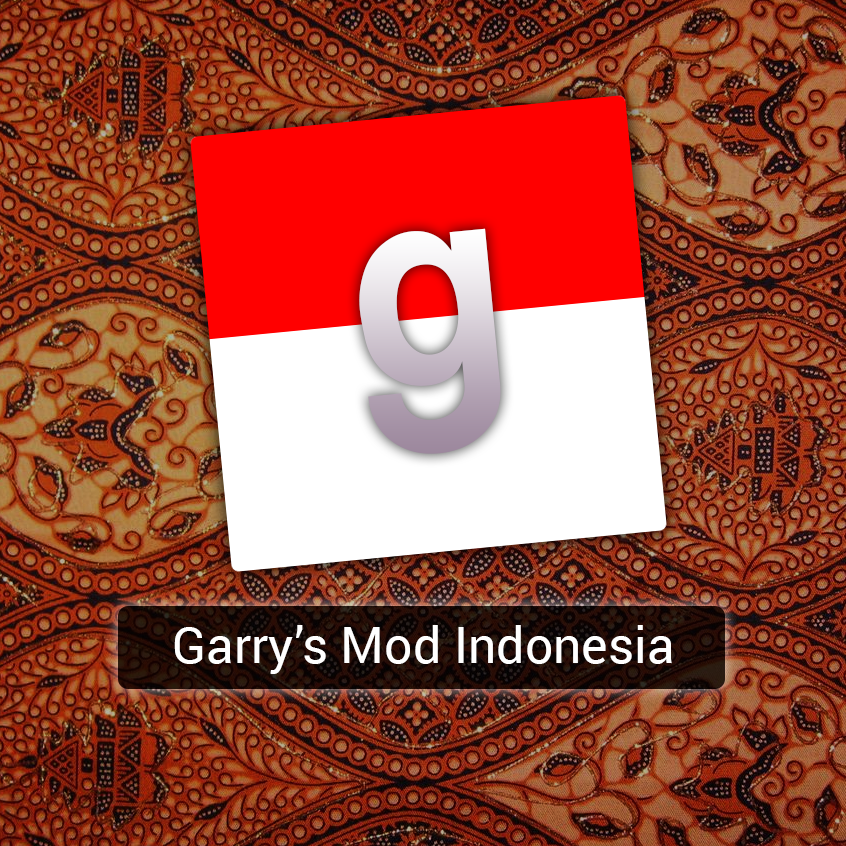
<style>
.page{position:relative;width:846px;height:846px}
.page>*{position:absolute;margin:0}
.t1{font:277.2px "Coolvetica";scale:0.91 1}
.t2{font:50px "Roboto-Regular";color:#ffffff}
</style>
<div class="page">
<p class="t1" style="left:359px;top:228px;width:142px;height:226px;rotate:-6deg">g</p>
<p class="t2" style="left:174px;top:625px;width:498px;height:49px">Garry’s Mod Indonesia</p>
</div>
